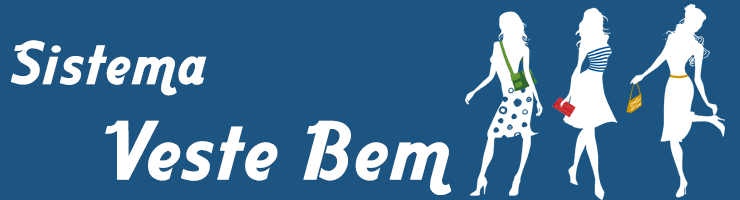
<style>
.page{position:relative;width:740px;height:200px;background:#1c5582}
.page>*{position:absolute;margin:0}
.t1{font:78.2px/47.8px "AardvarkCafe";letter-spacing:0.06em;color:#ffffff}
.t2{font:57.2px/47.8px "AardvarkCafe";letter-spacing:0.06em;color:#ffffff}
</style>
<div class="page">
<p class="t1" style="left:10px;top:40px;width:442px;height:155px"><span class="t2">Sistema<br><br>   </span>Veste Bem</p>
</div>
